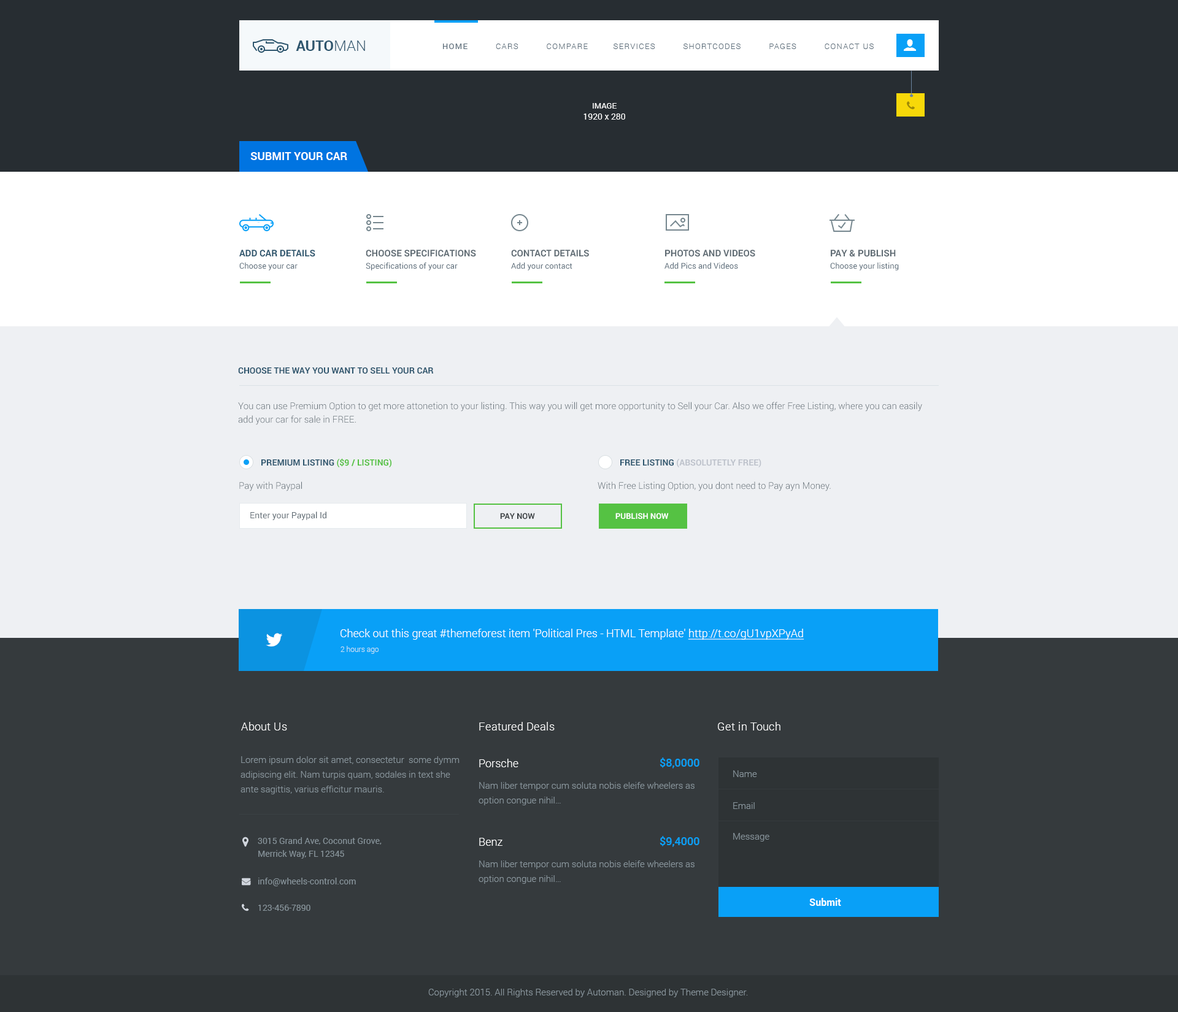
<style>
.page{position:relative;width:1178px;height:1012px;background:#353a3d}
.page>*{position:absolute;margin:0}
.t1{font:14.7px "Roboto-Bold";color:#2e566e;text-transform:uppercase}
.t2{font:14.7px "Roboto-Light";color:#2e566e;text-transform:uppercase}
.t3{font:8px "Roboto-Light";letter-spacing:0.1em;color:#5d6e7b;text-transform:uppercase}
.t4{font:8px "Roboto-Regular";letter-spacing:0.1em;color:#5d6e7b;text-transform:uppercase}
.t5{font:8.6px/11px "Roboto-Regular";color:#ffffff}
.t6{font:8px/11px "Roboto-Regular";color:#ffffff}
.t7{font:11px "Roboto-Bold";color:#ffffff;text-transform:uppercase}
.t8{font:9.2px/12.3px "Roboto-Bold";color:#2e566e;text-transform:uppercase}
.t9{font:8px/12.3px "Roboto-Regular";color:#5d6e7b}
.t10{font:9.2px/12.3px "Roboto-Bold";color:#616d75;text-transform:uppercase}
.t11{font:8.6px "Roboto-Bold";color:#2e566e;text-transform:uppercase}
.t12{font:9.2px/13.5px "Roboto-Light";color:#616d75}
.t13{font:8.6px "Roboto-Bold";color:#55c243;text-transform:uppercase}
.t14{font:8.6px "Roboto-Bold";color:#bdc2cb;text-transform:uppercase}
.t15{font:9.2px "Roboto-Light";color:#616d75}
.t16{font:8.6px "Roboto-Regular";color:#616d75}
.t17{font:8px "Roboto-Bold";color:#3e4346;text-transform:uppercase}
.t18{font:8px "Roboto-Bold";color:#ffffff;text-transform:uppercase}
.t19{font:11px "Roboto-Light";color:#ffffff}
.t20{font:11px "Roboto-Light";color:#ffffff;text-decoration:underline}
.t21{font:7.4px "Roboto-Light";color:#c3e1f4}
.t22{font:11px "Roboto-Light";letter-spacing:0.025em;color:#ffffff}
.t23{font:9.2px/14.7px "Roboto-Light";color:#88949b}
.t24{font:11px "Roboto-Medium";color:#09a0f7}
.t25{font:9.2px "Roboto-Light";color:#88949b}
.t26{font:8.6px/12.9px "Roboto-Regular";color:#88949b}
.t27{font:8.6px "Roboto-Regular";color:#88949b}
.t28{font:9.8px "Roboto-Bold";color:#ffffff}
</style>
<div class="page">
<p class="t1" style="left:296px;top:40px;width:69px;height:11px">Auto<span class="t2">man</span></p>
<p class="t3" style="left:443px;top:44px;width:431px;height:5px"><span class="t4">Home</span>          Cars          COMPARE         Services          Shortcodes          Pages          Conact us</p>
<p class="t5" style="left:583px;top:103px;width:42px;height:17px;text-align:center"><span class="t6">IMAGE<br></span>1920 x 280</p>
<p class="t7" style="left:250px;top:152px;width:97px;height:8px">Submit your car</p>
<p class="t8" style="left:239px;top:250px;width:76px;height:21px">ADD CAR DETAILS<br><span class="t9">Choose your car</span></p>
<p class="t9" style="left:366px;top:250px;width:110px;height:21px"><span class="t10">CHOOSE SPECIFICATIONS<br></span>Specifications of your car</p>
<p class="t9" style="left:511px;top:250px;width:78px;height:21px"><span class="t10">CONTACT DETAILS<br></span>Add your contact</p>
<p class="t9" style="left:664px;top:250px;width:91px;height:19px"><span class="t10">PHOTOS AND VIDEOS<br></span>Add Pics and Videos</p>
<p class="t9" style="left:830px;top:250px;width:69px;height:21px"><span class="t10">PAY &amp; PUBLISH<br></span>Choose your listing</p>
<p class="t11" style="left:238px;top:367px;width:196px;height:7px">CHOOSE THE WAY YOU WANT TO SELL YOUR CAR</p>
<p class="t12" style="left:238px;top:402px;width:684px;height:23px">You can use Premium Option to get more attonetion to your listing. This way you will get more opportunity to Sell your Car. Also we offer Free Listing, where you can easily<br>add your car for sale in FREE.</p>
<p class="t11" style="left:261px;top:458px;width:130px;height:9px">PREMIUM LISTING <span class="t13">($9 / LISTING)</span></p>
<p class="t14" style="left:620px;top:459px;width:141px;height:8px"><span class="t11">FREE LISTING </span>(ABSOLUTETLY FREE)</p>
<p class="t15" style="left:239px;top:482px;width:63px;height:9px">Pay with Paypal</p>
<p class="t15" style="left:598px;top:482px;width:233px;height:9px">With Free Listing Option, you dont need to Pay ayn Money.</p>
<p class="t16" style="left:250px;top:512px;width:76px;height:8px">Enter your Paypal Id</p>
<p class="t17" style="left:500px;top:513px;width:35px;height:7px">PAY NOW</p>
<p class="t18" style="left:615px;top:513px;width:54px;height:6px">PUBLISH NOW</p>
<p class="t19" style="left:341px;top:629px;width:463px;height:11px">Check out this great #themeforest item 'Political Pres - HTML Template' <span class="t20">http://t.co/gU1vpXPyAd</span></p>
<p class="t21" style="left:341px;top:646px;width:38px;height:8px">2 hours ago</p>
<p class="t22" style="left:241px;top:722px;width:46px;height:9px">About Us</p>
<p class="t22" style="left:479px;top:722px;width:76px;height:9px">Featured Deals</p>
<p class="t22" style="left:718px;top:722px;width:62px;height:9px">Get in Touch</p>
<p class="t23" style="left:240px;top:756px;width:220px;height:39px">Lorem ipsum dolor sit amet, consectetur  some dymm<br>adipiscing elit. Nam turpis quam, sodales in text she<br>ante sagittis, varius efficitur mauris.</p>
<p class="t19" style="left:479px;top:759px;width:39px;height:9px">Porsche</p>
<p class="t24" style="left:660px;top:758px;width:39px;height:11px">$8,0000</p>
<p class="t25" style="left:733px;top:771px;width:24px;height:6px">Name</p>
<p class="t23" style="left:479px;top:782px;width:215px;height:24px">Nam liber tempor cum soluta nobis eleife wheelers as<br>option congue nihil…</p>
<p class="t25" style="left:733px;top:802px;width:22px;height:7px">Email</p>
<p class="t25" style="left:733px;top:833px;width:36px;height:9px">Message</p>
<p class="t26" style="left:258px;top:837px;width:124px;height:22px">3015 Grand Ave, Coconut Grove,<br>Merrick Way, FL 12345</p>
<p class="t19" style="left:479px;top:838px;width:23px;height:8px">Benz</p>
<p class="t24" style="left:660px;top:836px;width:39px;height:11px">$9,4000</p>
<p class="t23" style="left:479px;top:861px;width:215px;height:23px">Nam liber tempor cum soluta nobis eleife wheelers as<br>option congue nihil…</p>
<p class="t27" style="left:258px;top:878px;width:98px;height:9px">info@wheels-control.com</p>
<p class="t27" style="left:258px;top:905px;width:52px;height:6px">123-456-7890</p>
<p class="t28" style="left:809px;top:898px;width:32px;height:8px">Submit</p>
<p class="t25" style="left:428px;top:989px;width:320px;height:9px">Copyright 2015. All Rights Reserved by Automan. Designed by Theme Designer.</p>
</div>
